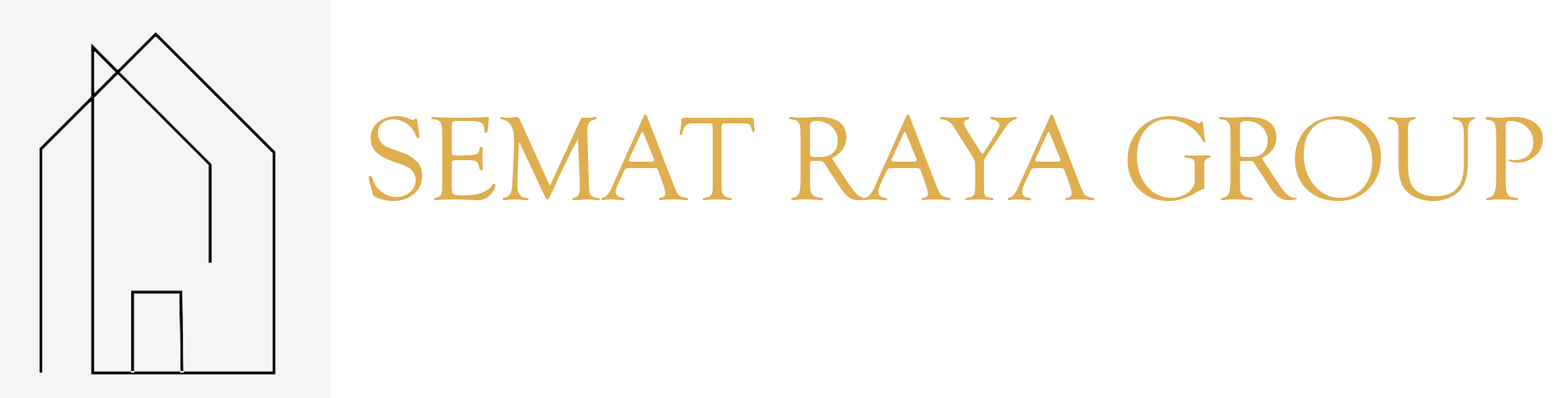
<style>
.page{position:relative;width:1568px;height:398px;background:#ffffff}
.page>*{position:absolute;margin:0}
.t1{font:122.6px "GoudyOldStyleT-Regular";color:#deae4f}
</style>
<div class="page">
<p class="t1" style="left:369px;top:115px;width:1174px;height:86px">SEMAT RAYA GROUP</p>
</div>
